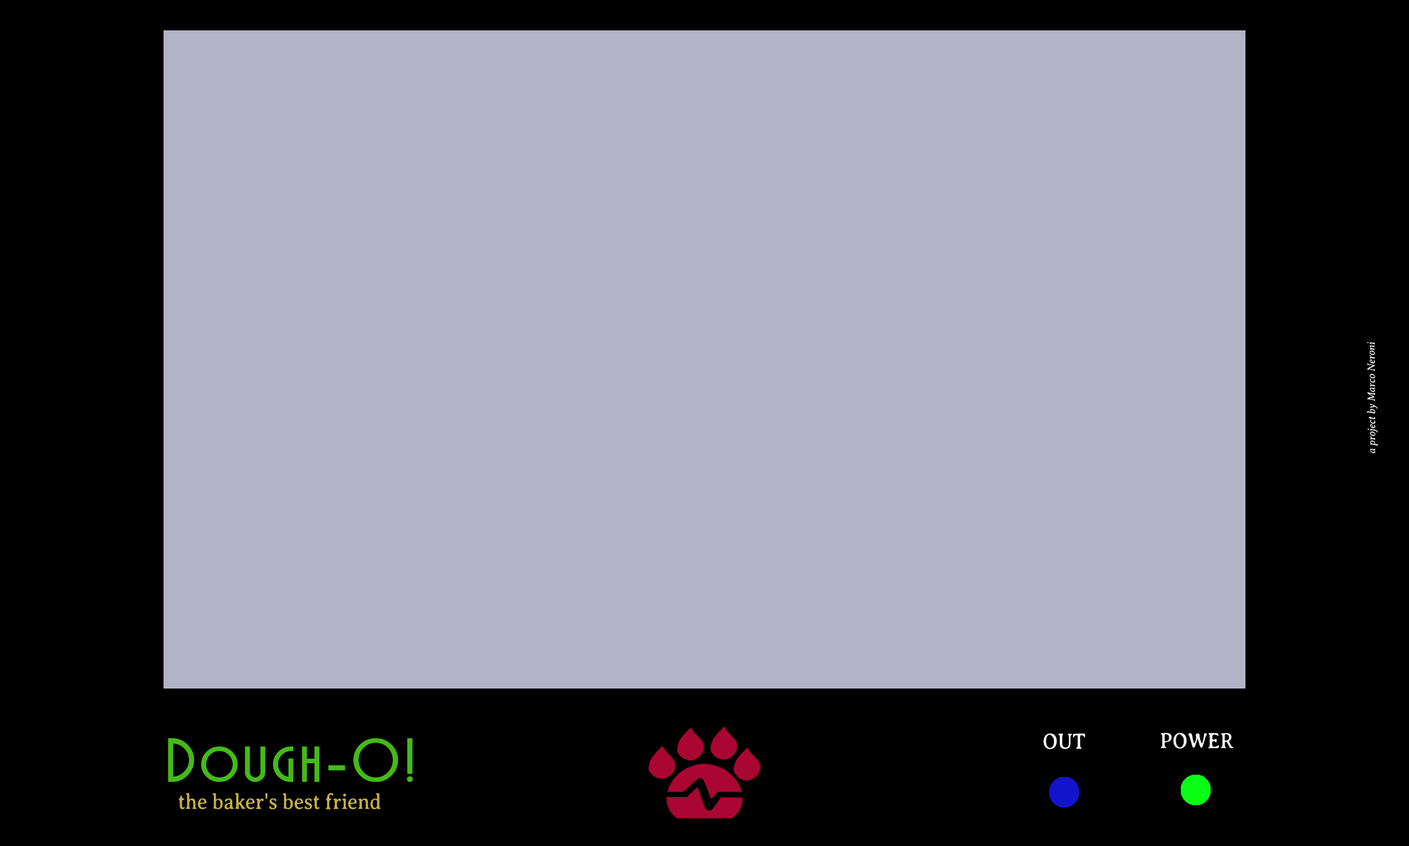
<style>
.page{position:relative;width:1409px;height:846px;background:#b3b3c7}
.page>*{position:absolute;margin:0}
.t1{font:22.1px "AveriaSerifLibre-Regular";color:#fcfafa;scale:0.91 1}
.t2{font:22.1px "AveriaSerifLibre-Regular";color:#f8f4f4;scale:0.91 1}
.t3{font:60.8px "MarquisetteBTNBold";letter-spacing:0.075em;color:#45ba17}
.t4{font:22.1px "AveriaSerifLibre-Regular";color:#c6af41;scale:0.91 1}
</style>
<div class="page">
<p class="t1" style="left:1043px;top:733px;width:42px;height:16px">OUT</p>
<p class="t2" style="left:1161px;top:733px;width:73px;height:16px">POWER</p>
<p class="t3" style="left:168px;top:738px;width:245px;height:44px">Dough-O!</p>
<p class="t4" style="left:179px;top:793px;width:202px;height:17px">the baker's best friend</p>
</div>
